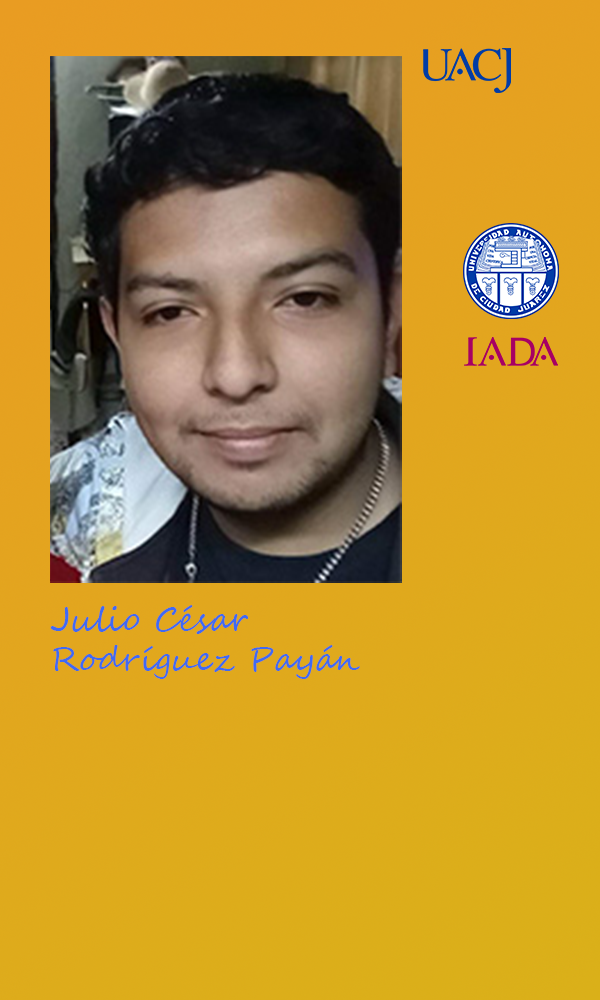
<style>
.page{position:relative;width:600px;height:1000px}
.page>*{position:absolute;margin:0}
.t1{font:33.3px "SegoeScript";color:#3f6af4}
</style>
<div class="page">
<p class="t1" style="left:50px;top:605px;width:310px;height:74px">Julio César Rodríguez Payán</p>
</div>
